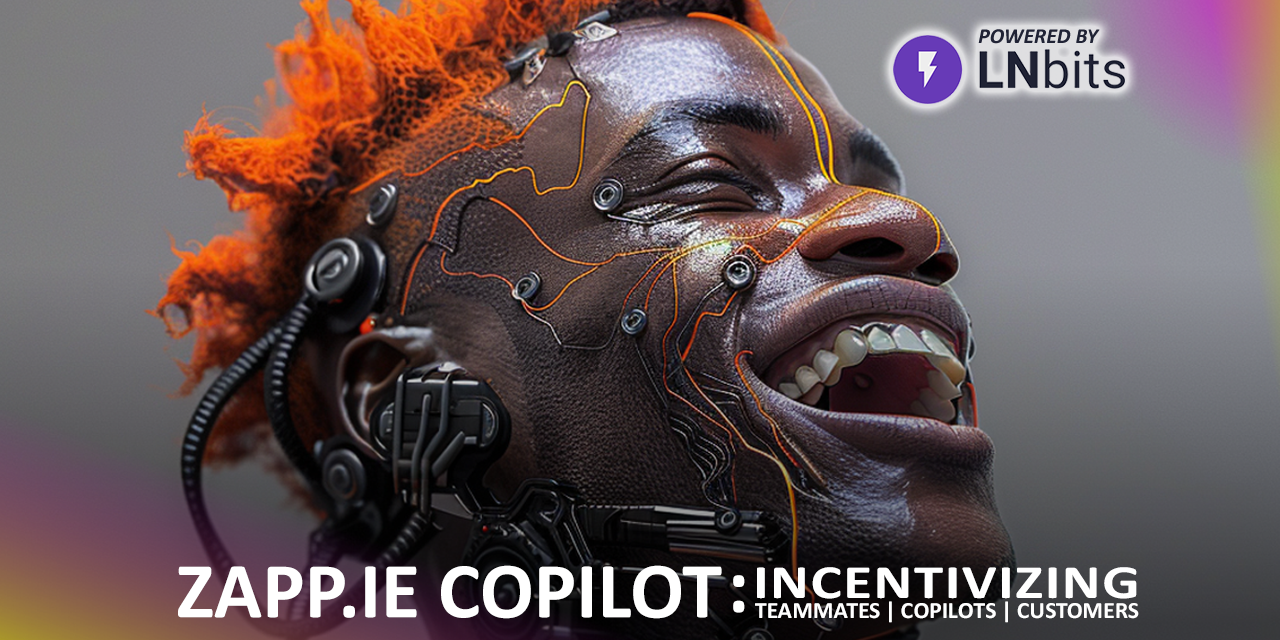
<style>
.page{position:relative;width:1280px;height:640px}
.page>*{position:absolute;margin:0}
.t1{font:21.6px "Calibri-BoldItalic";color:#202335}
.t2{font:80px "Calibri-Bold";color:#ffffff}
.t3{font:48px "Calibri-Bold";letter-spacing:0.025em;color:#ffffff;scale:1.23 1}
.t4{font:23.6px "Calibri-Bold";color:#ffffff}
</style>
<div class="page">
<p class="t1" style="left:978px;top:29px;width:122px;height:15px">POWERED BY</p>
<p class="t2" style="left:178px;top:565px;width:544px;height:54px">ZAPP.IE COPILOT</p>
<p class="t3" style="left:757px;top:567px;width:380px;height:32px">INCENTIVIZING</p>
<p class="t2" style="left:733px;top:575px;width:12px;height:38px">:</p>
<p class="t4" style="left:755px;top:601px;width:384px;height:22px">TEAMMATES | COPILOTS | CUSTOMERS</p>
</div>
